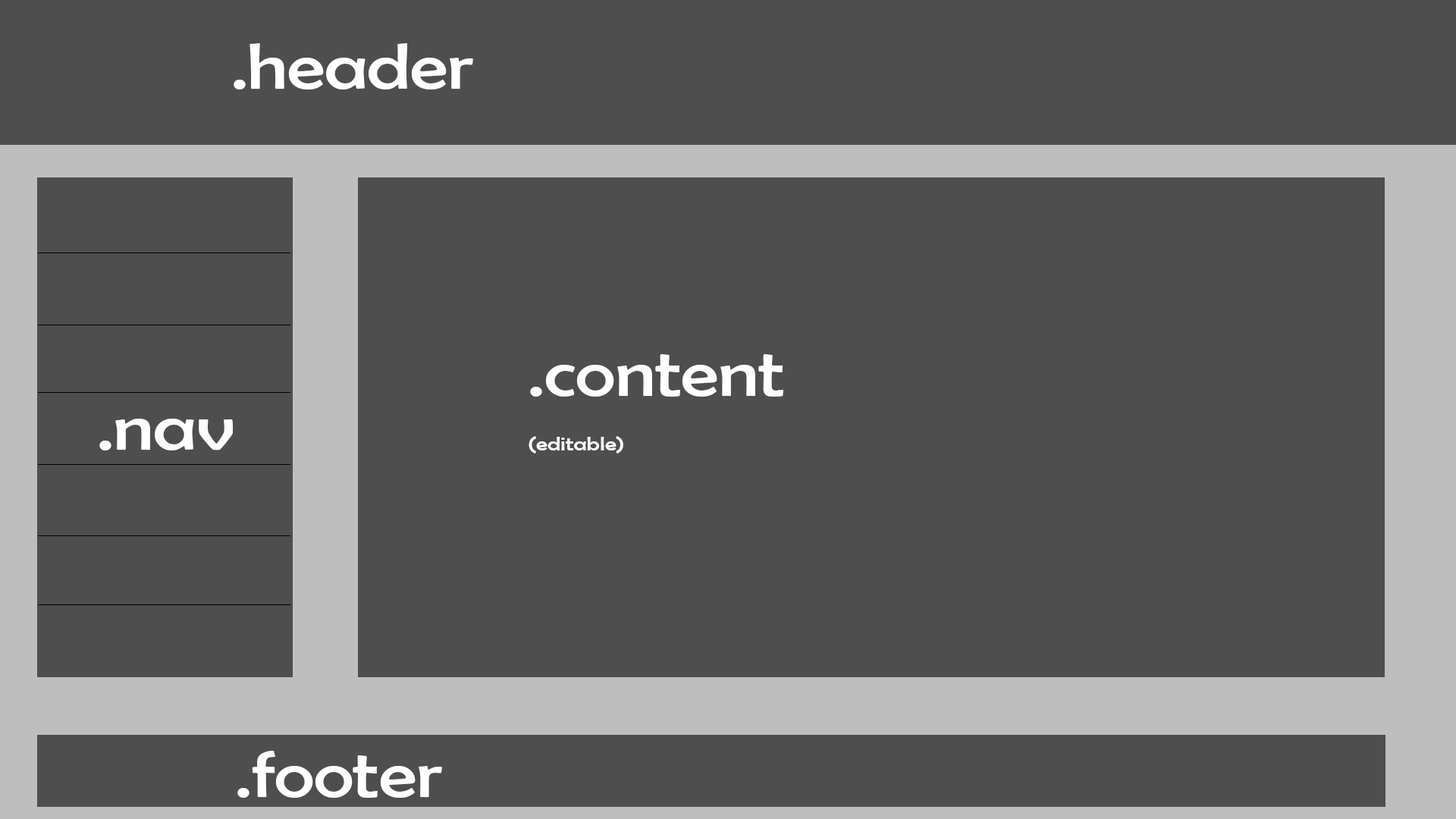
<style>
.page{position:relative;width:1456px;height:819px;background:#4e4e4e}
.page>*{position:absolute;margin:0}
.t1{font:65.5px "BerlinSansFB-Reg";color:#ffffff;scale:1.17 1}
.t2{font:20px/0px "BerlinSansFB-Reg";color:#ffffff;scale:1.17 1}
.t3{font:65.5px/13.7px "BerlinSansFB-Reg";color:#ffffff;scale:1.17 1}
</style>
<div class="page">
<p class="t1" style="left:234px;top:43px;width:239px;height:46px">.header</p>
<p class="t2" style="left:529px;top:354px;width:254px;height:99px"><span class="t3">.content<br><br><br><br><br></span>(editable)</p>
<p class="t1" style="left:99px;top:419px;width:135px;height:31px">.nav</p>
<p class="t1" style="left:237px;top:751px;width:205px;height:47px">.footer</p>
</div>
